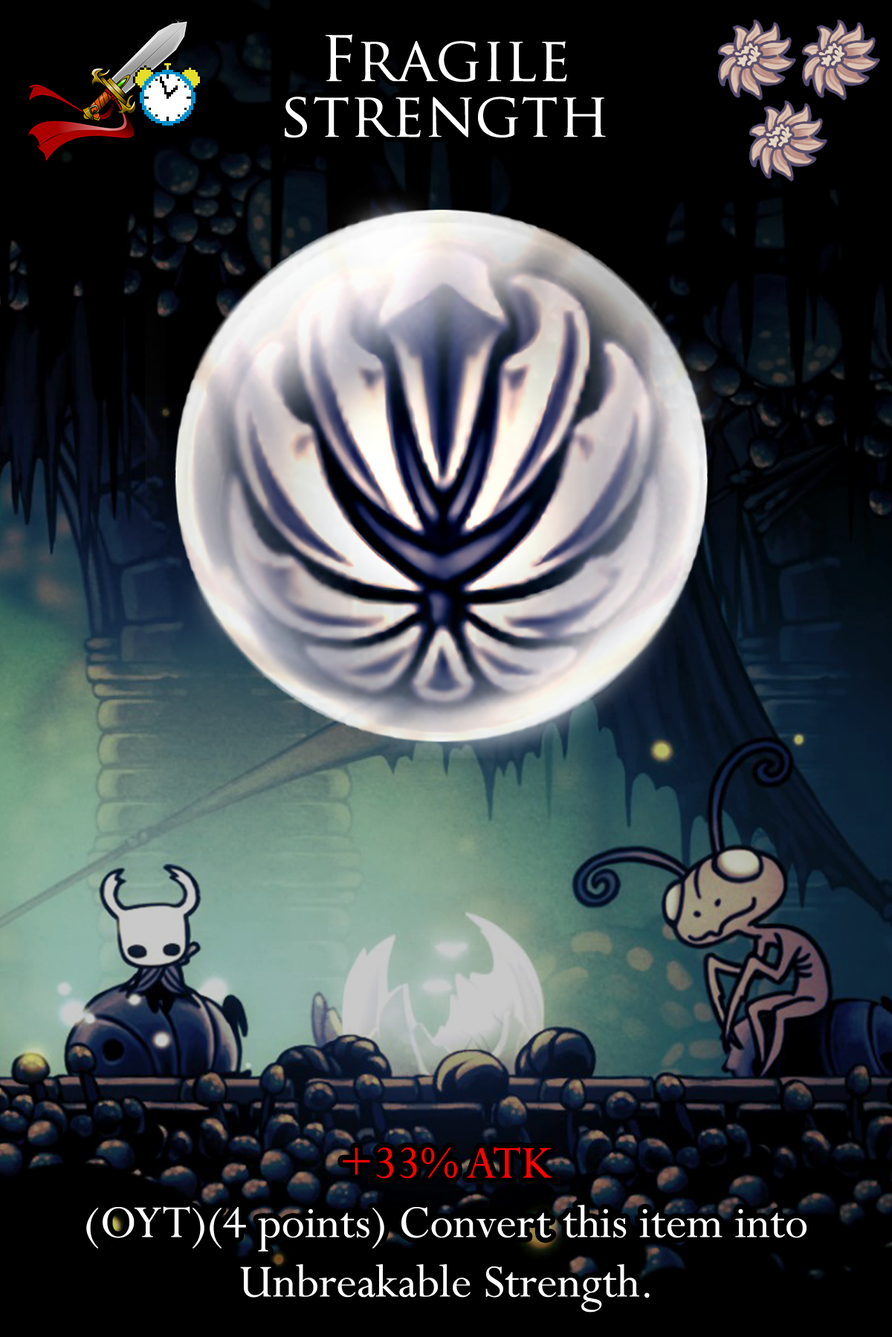
<style>
.page{position:relative;width:892px;height:1337px;background:#000000}
.page>*{position:absolute;margin:0}
.t1{font:104.8px/55.7px "TrajanPro-Regular";color:#ffffff}
.t2{font:87.7px/59.4px "Perpetua";color:#ffffff}
.t3{font:87.7px/59.4px "Perpetua";color:#ff0000}
</style>
<div class="page">
<p class="t1" style="left:285px;top:34px;width:321px;height:104px;text-align:center">Fragile<br>strength</p>
<p class="t2" style="left:86px;top:1147px;width:720px;height:166px;text-align:center"><span class="t3">+33% ATK<br></span>(OYT)(4 points) Convert this item into Unbreakable Strength.</p>
</div>
